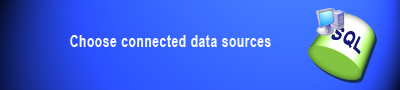
<style>
.page{position:relative;width:400px;height:90px}
.page>*{position:absolute;margin:0}
.t1{font:19.6px "Arial-BoldMT";letter-spacing:0.05em;color:#121777;scale:0.77 1}
.t2{font:15.6px "Arial-BoldMT";letter-spacing:0.05em;color:#f5f6f9;scale:0.77 1}
</style>
<div class="page">
<p class="t1" style="left:331px;top:27px;width:30px;height:28px;rotate:28deg">SQL</p>
<p class="t2" style="left:70px;top:35px;width:201px;height:12px">Choose connected data sources</p>
</div>
